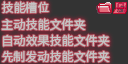
<style>
.page{position:relative;width:128px;height:64px;background:#333333}
.page>*{position:absolute;margin:0}
.t1{font:12px/16px "SourceHanSansSC-Regular";color:#c3c3c3}
.t2{font:12px/17px "SourceHanSansSC-Regular";color:#c3c3c3}
</style>
<div class="page">
<p class="t1" style="left:1px;top:1px;width:109px;height:62px"><span class="t2">技能槽位<br></span>主动技能文件夹<br>自动效果技能文件夹<br>先制发动技能文件夹</p>
</div>
